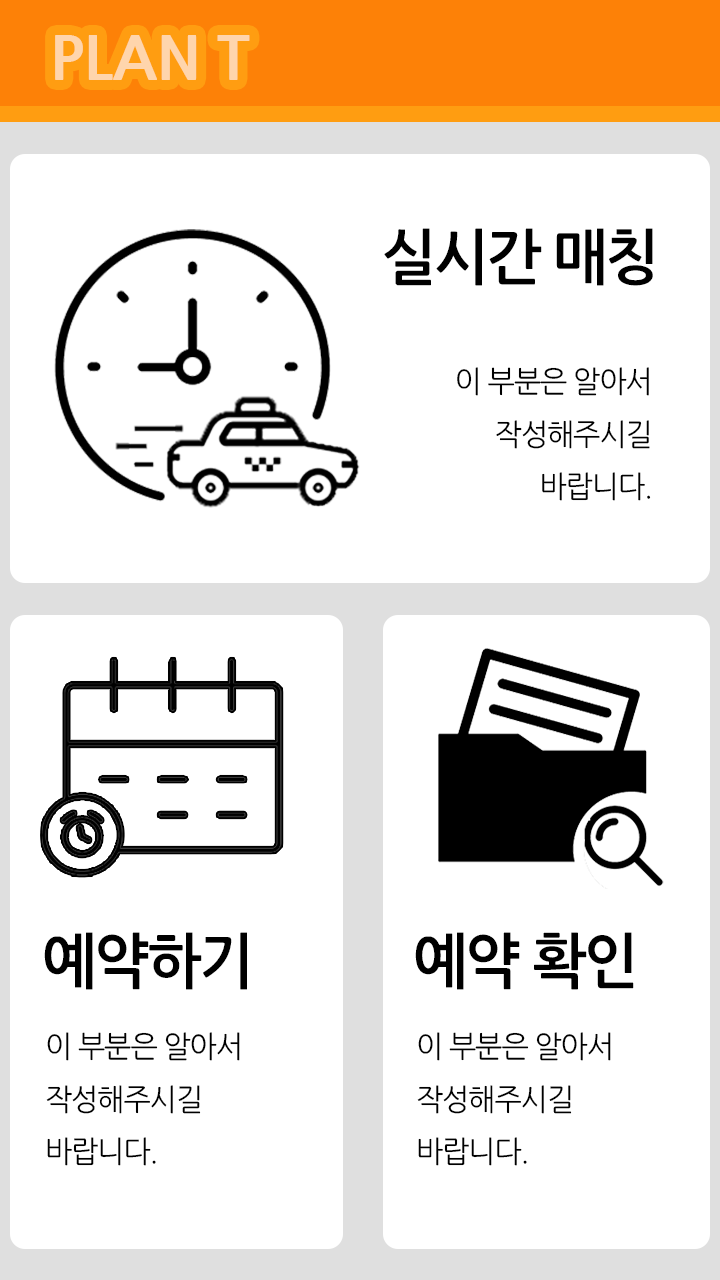
<style>
.page{position:relative;width:720px;height:1280px;background:#ffffff}
.page>*{position:absolute;margin:0}
.t1{font:60px "NanumGothicExtraBold";color:#ffd5ac}
.t2{font:60px "NanumGothicBold";letter-spacing:-0.04em;color:#000000;scale:0.97 1}
.t3{font:30px "NanumGothic";letter-spacing:-0.04em;color:#000000;scale:0.97 1}
</style>
<div class="page">
<p class="t1" style="left:55px;top:35px;width:195px;height:45px">PLAN T</p>
<p class="t2" style="left:384px;top:228px;width:269px;height:58px">실시간 매칭</p>
<p class="t3" style="left:457px;top:367px;width:194px;height:134px;text-align:right">이 부분은 알아서 작성해주시길 바랍니다.</p>
<p class="t2" style="left:44px;top:932px;width:203px;height:58px">예약하기</p>
<p class="t2" style="left:415px;top:932px;width:219px;height:58px">예약 확인</p>
<p class="t3" style="left:46px;top:1032px;width:194px;height:134px">이 부분은 알아서 작성해주시길 바랍니다.</p>
<p class="t3" style="left:417px;top:1032px;width:194px;height:134px">이 부분은 알아서 작성해주시길 바랍니다.</p>
</div>
